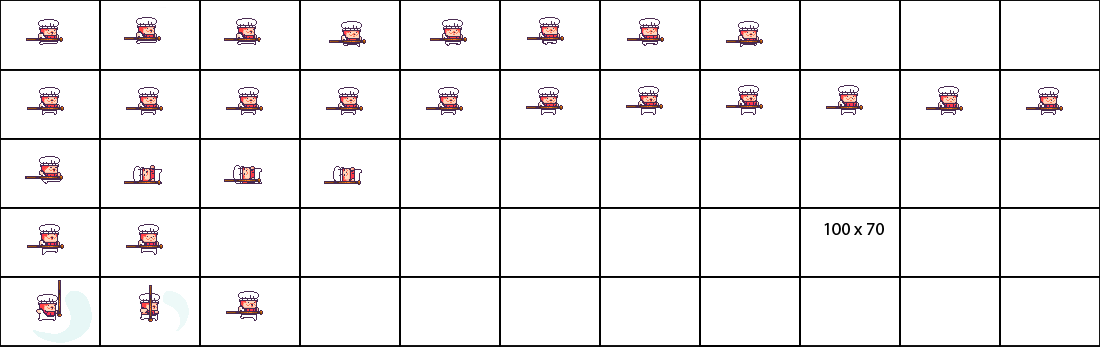
<style>
.page{position:relative;width:1100px;height:347px;background:#ffffff}
.page>*{position:absolute;margin:0}
.t1{font:18px "MyriadPro-Regular";color:#000000}
</style>
<div class="page">
<p class="t1" style="left:824px;top:223px;width:60px;height:12px">100 x 70</p>
</div>
